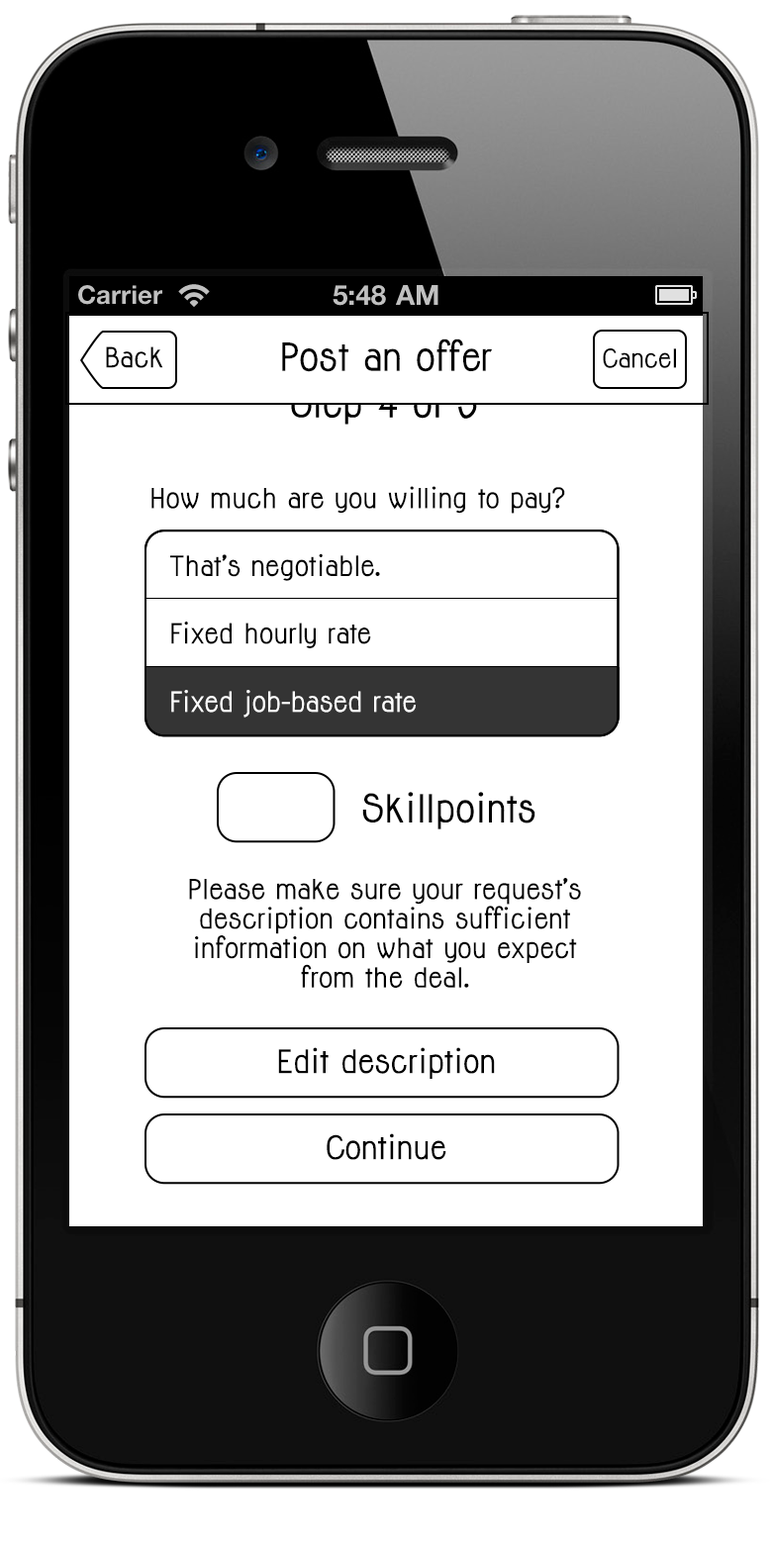
<style>
.page{position:relative;width:772px;height:1545px;background:#ffffff}
.page>*{position:absolute;margin:0}
.t1{font:35.6px "Jolly-Bold";color:#000000}
.t2{font:25.7px "Jolly-Bold";color:#000000}
.t3{font:23.8px "Jolly-Bold";color:#000000}
.t4{font:25.5px "Jolly-Bold";color:#000000}
.t5{font:25.7px "Jolly-Bold";color:#ffffff}
.t6{font:25.5px/29.5px "Jolly-Bold";color:#000000}
.t7{font:29.8px "Jolly-Bold";color:#000000}
</style>
<div class="page">
<p class="t1" style="left:282px;top:338px;width:210px;height:34px">Post an offer</p>
<p class="t2" style="left:106px;top:346px;width:57px;height:22px">Back</p>
<p class="t3" style="left:603px;top:348px;width:73px;height:20px">Cancel</p>
<p class="t4" style="left:151px;top:486px;width:414px;height:28px">How much are you willing to pay?</p>
<p class="t2" style="left:170px;top:553px;width:210px;height:28px">That’s negotiable.</p>
<p class="t2" style="left:171px;top:621px;width:200px;height:27px">Fixed hourly rate</p>
<p class="t5" style="left:171px;top:690px;width:245px;height:27px">Fixed job-based rate</p>
<p class="t1" style="left:362px;top:792px;width:173px;height:37px">Skillpoints</p>
<p class="t6" style="left:189px;top:878px;width:392px;height:110px;text-align:center">Please make sure your request’s <br>description contains sufficient <br>information on what you expect <br>from the deal.</p>
<p class="t7" style="left:278px;top:1047px;width:217px;height:32px">Edit description</p>
<p class="t7" style="left:327px;top:1133px;width:119px;height:27px">Continue</p>
</div>
